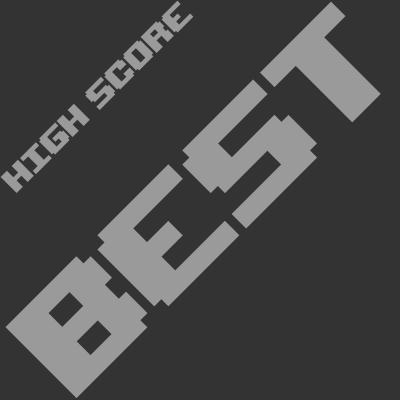
<style>
.page{position:relative;width:400px;height:400px;background:#333333}
.page>*{position:absolute;margin:0}
.t1{font:45px "UpheavalPro-Regular";color:#9a9a9a}
.t2{font:200px "UpheavalPro-Regular";color:#9a9a9a}
</style>
<div class="page">
<p class="t1" style="left:0px;top:0px;width:194px;height:193px;rotate:-45deg">High Score</p>
<p class="t2" style="left:5px;top:1px;width:376px;height:397px;rotate:-45deg">best</p>
</div>
